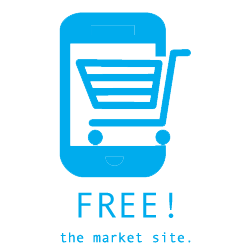
<style>
.page{position:relative;width:250px;height:250px;background:#ffffff}
.page>*{position:absolute;margin:0}
.t1{font:36px "AndaleMono";color:#00aced}
.t2{font:14px "AndaleMono";color:#00aced}
</style>
<div class="page">
<p class="t1" style="left:78px;top:192px;width:96px;height:26px">FREE!</p>
<p class="t2" style="left:60px;top:232px;width:131px;height:11px">the market site.</p>
</div>
